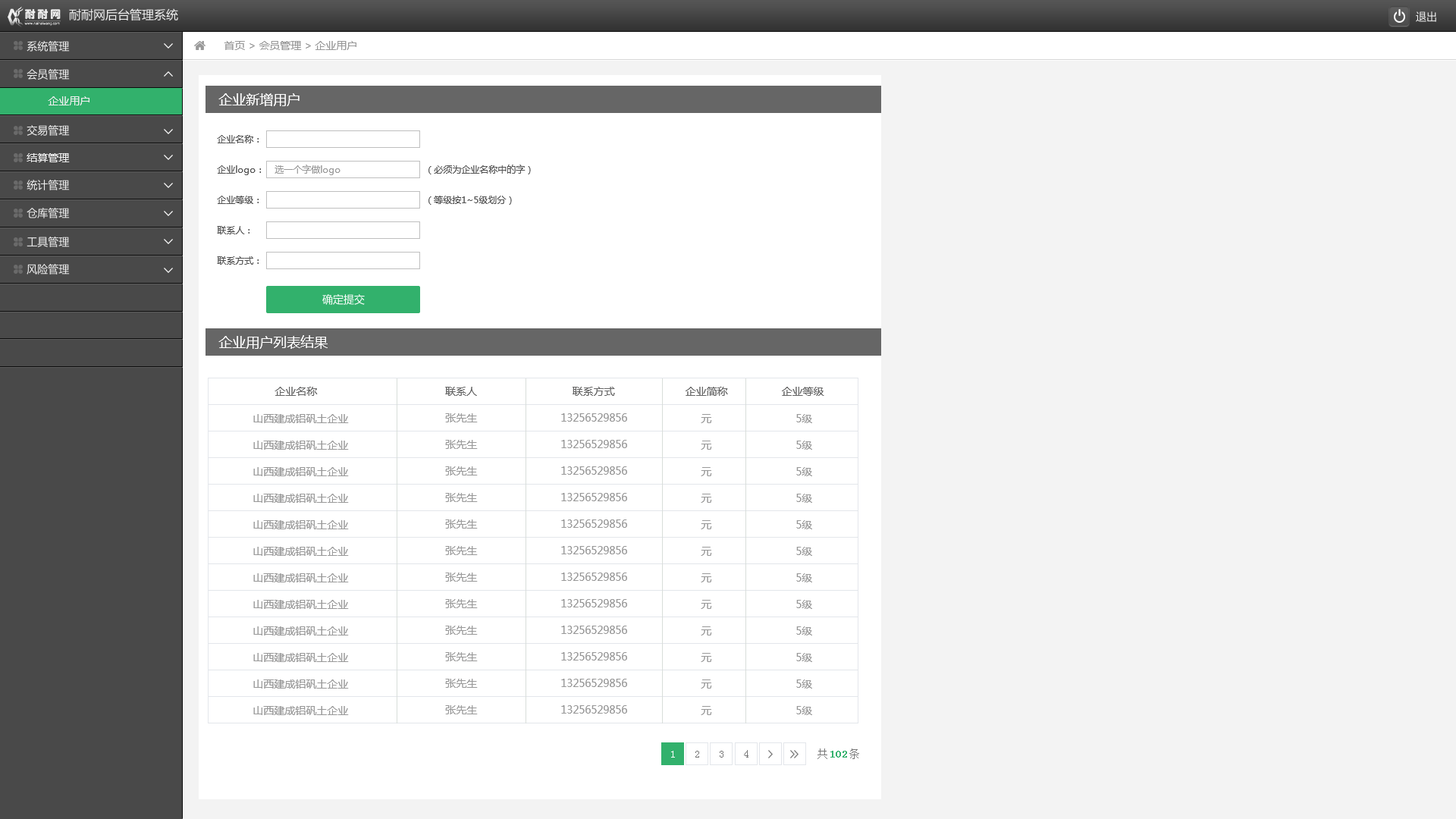
<style>
.page{position:relative;width:1456px;height:819px;background:#f3f3f3}
.page>*{position:absolute;margin:0}
.t1{font:12.1px "MicrosoftYaHei";color:#efefef}
.t2{font:10.6px "MicrosoftYaHei";color:#efefef}
.t3{font:10.6px "MicrosoftYaHei";color:#999999}
.t4{font:13.6px "MicrosoftYaHei";color:#ffffff}
.t5{font:9.1px "MicrosoftYaHei";color:#535353}
.t6{font:9.1px "MicrosoftYaHei";color:#999999}
.t7{font:10.6px "MicrosoftYaHei";color:#ffffff}
.t8{font:10.6px "MicrosoftYaHei";color:#666666}
.t9{font:10.6px "SimSun";color:#767676}
.t10{font:10.6px "SimSun";color:#ffffff}
.t11{font:10.6px "SimSun";color:#32b16c;font-weight:bold}
</style>
<div class="page">
<p class="t1" style="left:69px;top:8px;width:109px;height:13px">耐耐网后台管理系统</p>
<p class="t2" style="left:1416px;top:11px;width:20px;height:11px">退出</p>
<p class="t2" style="left:27px;top:41px;width:43px;height:11px">系统管理</p>
<p class="t3" style="left:224px;top:41px;width:132px;height:9px">首页 &gt; 会员管理 &gt; 企业用户</p>
<p class="t2" style="left:27px;top:69px;width:43px;height:11px">会员管理</p>
<p class="t2" style="left:48px;top:96px;width:41px;height:9px">企业用户</p>
<p class="t4" style="left:218px;top:93px;width:82px;height:13px">企业新增用户</p>
<p class="t2" style="left:27px;top:125px;width:43px;height:11px">交易管理</p>
<p class="t5" style="left:217px;top:135px;width:42px;height:8px">企业名称：</p>
<p class="t2" style="left:27px;top:153px;width:43px;height:9px">结算管理</p>
<p class="t5" style="left:217px;top:165px;width:44px;height:10px">企业logo：</p>
<p class="t6" style="left:275px;top:165px;width:65px;height:10px">选一个字做logo</p>
<p class="t5" style="left:428px;top:165px;width:103px;height:9px">（必须为企业名称中的字）</p>
<p class="t2" style="left:27px;top:180px;width:43px;height:10px">统计管理</p>
<p class="t5" style="left:217px;top:196px;width:42px;height:8px">企业等级：</p>
<p class="t5" style="left:428px;top:196px;width:84px;height:9px">（等级按1~5级划分）</p>
<p class="t2" style="left:27px;top:208px;width:43px;height:10px">仓库管理</p>
<p class="t5" style="left:217px;top:226px;width:32px;height:8px">联系人：</p>
<p class="t2" style="left:27px;top:237px;width:43px;height:10px">工具管理</p>
<p class="t5" style="left:217px;top:256px;width:42px;height:9px">联系方式：</p>
<p class="t2" style="left:27px;top:264px;width:43px;height:11px">风险管理</p>
<p class="t7" style="left:322px;top:294px;width:43px;height:11px">确定提交</p>
<p class="t4" style="left:218px;top:335px;width:110px;height:14px">企业用户列表结果</p>
<p class="t8" style="left:275px;top:387px;width:43px;height:9px">企业名称</p>
<p class="t8" style="left:445px;top:387px;width:32px;height:9px">联系人</p>
<p class="t8" style="left:573px;top:387px;width:42px;height:9px">联系方式</p>
<p class="t8" style="left:686px;top:387px;width:42px;height:9px">企业简称</p>
<p class="t8" style="left:782px;top:387px;width:42px;height:9px">企业等级</p>
<p class="t3" style="left:445px;top:413px;width:33px;height:9px">张先生</p>
<p class="t3" style="left:561px;top:413px;width:66px;height:9px">13256529856</p>
<p class="t3" style="left:253px;top:414px;width:96px;height:9px">山西建成铝矾土企业</p>
<p class="t3" style="left:701px;top:414px;width:11px;height:9px">元</p>
<p class="t3" style="left:796px;top:414px;width:16px;height:9px">5级</p>
<p class="t3" style="left:253px;top:441px;width:96px;height:9px">山西建成铝矾土企业</p>
<p class="t3" style="left:445px;top:440px;width:33px;height:9px">张先生</p>
<p class="t3" style="left:561px;top:440px;width:66px;height:8px">13256529856</p>
<p class="t3" style="left:701px;top:441px;width:11px;height:9px">元</p>
<p class="t3" style="left:796px;top:441px;width:16px;height:9px">5级</p>
<p class="t3" style="left:253px;top:467px;width:96px;height:9px">山西建成铝矾土企业</p>
<p class="t3" style="left:445px;top:466px;width:33px;height:9px">张先生</p>
<p class="t3" style="left:561px;top:466px;width:66px;height:9px">13256529856</p>
<p class="t3" style="left:701px;top:467px;width:11px;height:9px">元</p>
<p class="t3" style="left:796px;top:467px;width:16px;height:9px">5级</p>
<p class="t3" style="left:253px;top:494px;width:96px;height:9px">山西建成铝矾土企业</p>
<p class="t3" style="left:445px;top:493px;width:33px;height:9px">张先生</p>
<p class="t3" style="left:561px;top:493px;width:66px;height:8px">13256529856</p>
<p class="t3" style="left:701px;top:494px;width:11px;height:9px">元</p>
<p class="t3" style="left:796px;top:494px;width:16px;height:9px">5级</p>
<p class="t3" style="left:253px;top:520px;width:96px;height:9px">山西建成铝矾土企业</p>
<p class="t3" style="left:445px;top:519px;width:33px;height:10px">张先生</p>
<p class="t3" style="left:561px;top:519px;width:66px;height:9px">13256529856</p>
<p class="t3" style="left:701px;top:520px;width:11px;height:9px">元</p>
<p class="t3" style="left:796px;top:520px;width:16px;height:9px">5级</p>
<p class="t3" style="left:445px;top:546px;width:33px;height:9px">张先生</p>
<p class="t3" style="left:561px;top:546px;width:66px;height:8px">13256529856</p>
<p class="t3" style="left:253px;top:547px;width:96px;height:9px">山西建成铝矾土企业</p>
<p class="t3" style="left:701px;top:547px;width:11px;height:9px">元</p>
<p class="t3" style="left:796px;top:547px;width:16px;height:9px">5级</p>
<p class="t3" style="left:253px;top:573px;width:96px;height:9px">山西建成铝矾土企业</p>
<p class="t3" style="left:445px;top:573px;width:33px;height:9px">张先生</p>
<p class="t3" style="left:561px;top:573px;width:66px;height:8px">13256529856</p>
<p class="t3" style="left:701px;top:573px;width:11px;height:9px">元</p>
<p class="t3" style="left:796px;top:573px;width:16px;height:9px">5级</p>
<p class="t3" style="left:253px;top:600px;width:96px;height:9px">山西建成铝矾土企业</p>
<p class="t3" style="left:445px;top:599px;width:33px;height:9px">张先生</p>
<p class="t3" style="left:561px;top:599px;width:66px;height:8px">13256529856</p>
<p class="t3" style="left:701px;top:600px;width:11px;height:9px">元</p>
<p class="t3" style="left:796px;top:600px;width:16px;height:9px">5级</p>
<p class="t3" style="left:253px;top:626px;width:96px;height:9px">山西建成铝矾土企业</p>
<p class="t3" style="left:445px;top:626px;width:33px;height:9px">张先生</p>
<p class="t3" style="left:561px;top:626px;width:66px;height:8px">13256529856</p>
<p class="t3" style="left:701px;top:626px;width:11px;height:9px">元</p>
<p class="t3" style="left:796px;top:626px;width:16px;height:9px">5级</p>
<p class="t3" style="left:253px;top:653px;width:96px;height:9px">山西建成铝矾土企业</p>
<p class="t3" style="left:445px;top:652px;width:33px;height:9px">张先生</p>
<p class="t3" style="left:561px;top:652px;width:66px;height:8px">13256529856</p>
<p class="t3" style="left:701px;top:653px;width:11px;height:9px">元</p>
<p class="t3" style="left:796px;top:653px;width:16px;height:9px">5级</p>
<p class="t3" style="left:253px;top:679px;width:96px;height:10px">山西建成铝矾土企业</p>
<p class="t3" style="left:445px;top:679px;width:33px;height:9px">张先生</p>
<p class="t3" style="left:561px;top:679px;width:66px;height:8px">13256529856</p>
<p class="t3" style="left:701px;top:679px;width:11px;height:10px">元</p>
<p class="t3" style="left:796px;top:679px;width:16px;height:10px">5级</p>
<p class="t3" style="left:253px;top:706px;width:96px;height:9px">山西建成铝矾土企业</p>
<p class="t3" style="left:445px;top:705px;width:33px;height:9px">张先生</p>
<p class="t3" style="left:561px;top:705px;width:66px;height:9px">13256529856</p>
<p class="t3" style="left:701px;top:706px;width:11px;height:9px">元</p>
<p class="t3" style="left:796px;top:706px;width:16px;height:9px">5级</p>
<p class="t9" style="left:744px;top:750px;width:4px;height:8px">4</p>
<p class="t9" style="left:817px;top:748px;width:42px;height:11px">共    条</p>
<p class="t10" style="left:671px;top:751px;width:4px;height:7px">1</p>
<p class="t9" style="left:695px;top:751px;width:4px;height:7px">2</p>
<p class="t9" style="left:720px;top:751px;width:3px;height:7px">3</p>
<p class="t11" style="left:830px;top:751px;width:17px;height:7px">102</p>
</div>
